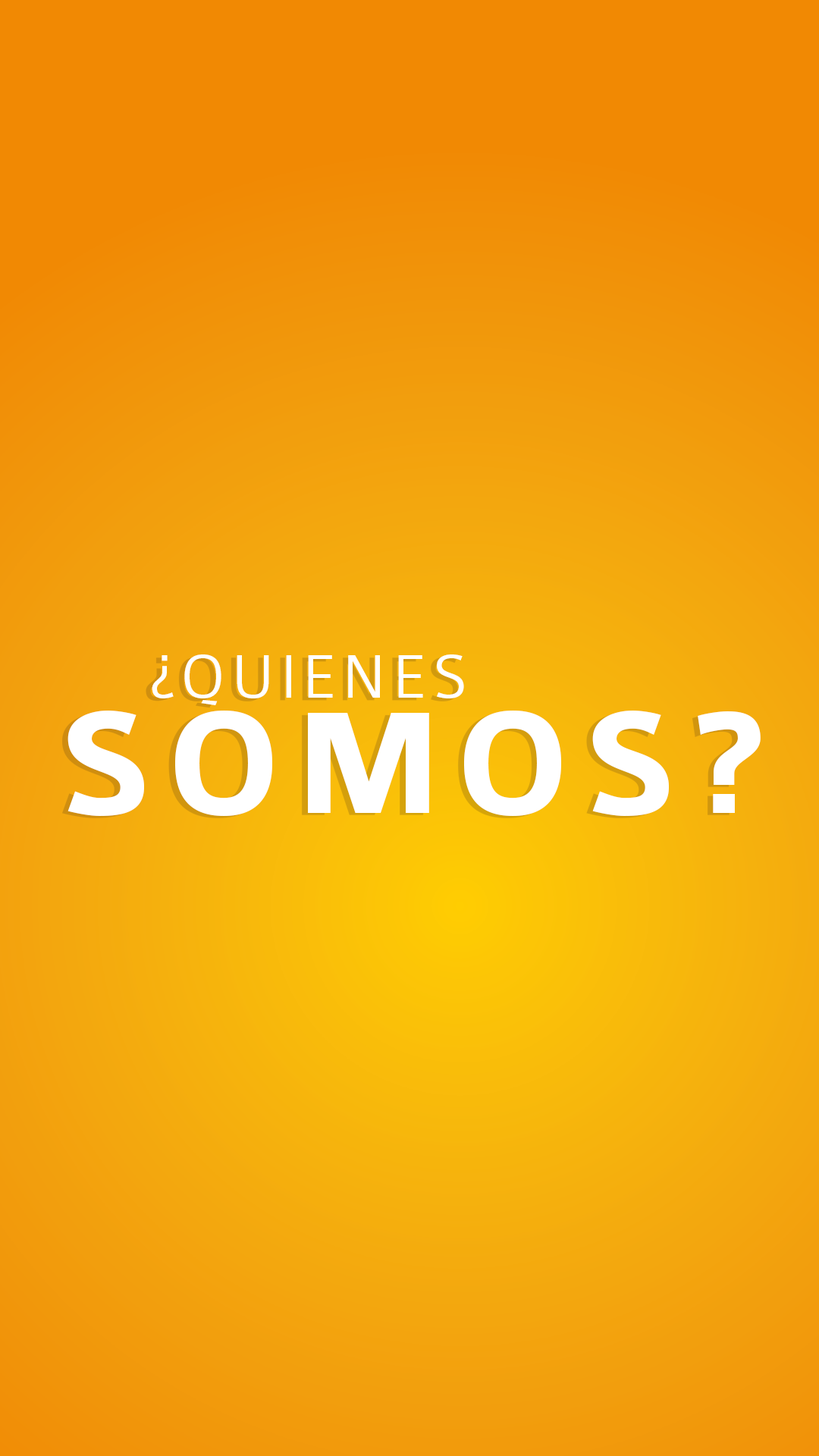
<style>
.page{position:relative;width:819px;height:1456px}
.page>*{position:absolute;margin:0}
.t1{font:65.7px "Colaborate-Light";letter-spacing:0.08em;color:#ffffff}
.t2{font:154.3px "Colaborate-Bold";letter-spacing:0.08em;color:#ffffff}
</style>
<div class="page">
<p class="t1" style="left:152px;top:654px;width:312px;height:51px">¿QUIENES</p>
<p class="t2" style="left:67px;top:711px;width:694px;height:105px">SOMOS?</p>
</div>
